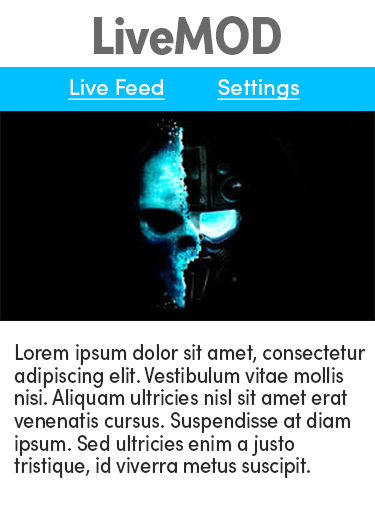
<style>
.page{position:relative;width:375px;height:512px;background:#ffffff}
.page>*{position:absolute;margin:0}
.t1{font:54.2px "SofiaProBoldCondensed";letter-spacing:-0.02em;color:#6a6a6a}
.t2{font:22.6px "SofiaProRegular";color:#ffffff;text-decoration:underline}
.t3{font:22.6px/22.6px "SofiaProRegularCondensed";color:#292929}
</style>
<div class="page">
<p class="t1" style="left:94px;top:16px;width:187px;height:39px">LiveMOD</p>
<p class="t2" style="left:68px;top:79px;width:232px;height:21px">Live Feed         Settings</p>
<p class="t3" style="left:14px;top:344px;width:352px;height:134px">Lorem ipsum dolor sit amet, consectetur adipiscing elit. Vestibulum vitae mollis nisi. Aliquam ultricies nisl sit amet erat venenatis cursus. Suspendisse at diam ipsum. Sed ultricies enim a justo tristique, id viverra metus suscipit.</p>
</div>
